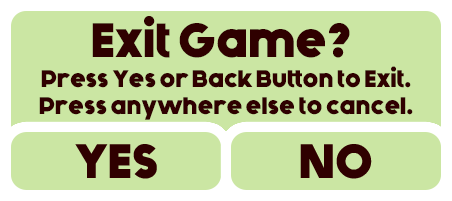
<style>
.page{position:relative;width:452px;height:201px;background:#cbe6a3}
.page>*{position:absolute;margin:0}
.t1{font:48px "Generica-Bold";color:#2f0000}
.t2{font:24px "Generica-Bold";color:#2f0000}
</style>
<div class="page">
<p class="t1" style="left:92px;top:16px;width:258px;height:42px">Exit Game?</p>
<p class="t2" style="left:41px;top:66px;width:370px;height:22px">Press Yes or Back Button to Exit.</p>
<p class="t2" style="left:39px;top:97px;width:374px;height:23px">Press anywhere else to cancel.</p>
</div>
